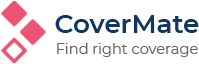
<style>
.page{position:relative;width:199px;height:64px;background:#ffffff}
.page>*{position:absolute;margin:0}
.t1{font:26.2px "Montserrat-SemiBold";color:#11365f}
.t2{font:14.6px "Montserrat-Regular";color:#666666}
</style>
<div class="page">
<p class="t1" style="left:55px;top:15px;width:144px;height:18px">CoverMate</p>
<p class="t2" style="left:57px;top:43px;width:141px;height:14px">Find right coverage</p>
</div>
